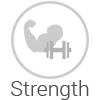
<style>
.page{position:relative;width:100px;height:100px;background:#ffffff}
.page>*{position:absolute;margin:0}
.t1{font:21px "Roboto-Light";color:#4d4d4d}
</style>
<div class="page">
<p class="t1" style="left:11px;top:80px;width:78px;height:20px">Strength</p>
</div>
